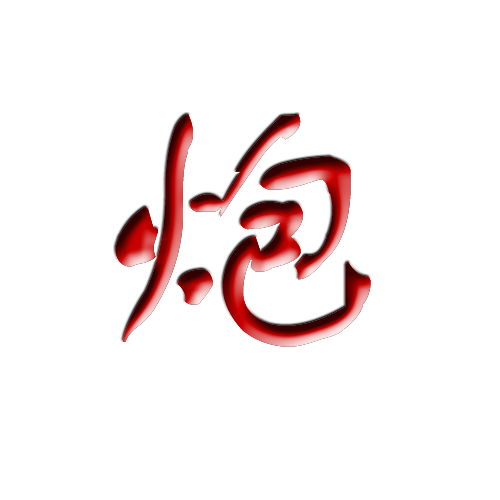
<style>
.page{position:relative;width:500px;height:500px;background:#ffffff}
.page>*{position:absolute;margin:0}
.t1{font:320px "FZSTK--GBK1-0"}
</style>
<div class="page">
<p class="t1" style="left:115px;top:114px;width:256px;height:233px">炮</p>
</div>
